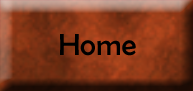
<style>
.page{position:relative;width:193px;height:91px}
.page>*{position:absolute;margin:0}
.t1{font:30.5px "BerlinSansFB-Reg";color:#000000}
</style>
<div class="page">
<p class="t1" style="left:60px;top:34px;width:76px;height:22px">Home</p>
</div>
